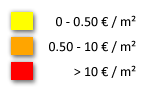
<style>
.page{position:relative;width:151px;height:95px;background:#ffffff}
.page>*{position:absolute;margin:0}
.t1{font:14px "Calibri";color:#000000}
</style>
<div class="page">
<p class="t1" style="left:56px;top:15px;width:80px;height:13px">0 - 0.50 € / m²</p>
<p class="t1" style="left:49px;top:40px;width:87px;height:13px">0.50 - 10 € / m²</p>
<p class="t1" style="left:74px;top:65px;width:62px;height:13px">&gt; 10 € / m²</p>
</div>
